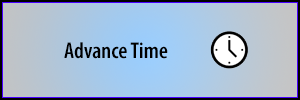
<style>
.page{position:relative;width:300px;height:100px}
.page>*{position:absolute;margin:0}
.t1{font:22.9px "MyriadPro-SemiboldCond";color:#000000}
</style>
<div class="page">
<p class="t1" style="left:64px;top:42px;width:104px;height:17px">Advance Time</p>
</div>
